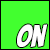
<style>
.page{position:relative;width:50px;height:50px;background:#42ff2f}
.page>*{position:absolute;margin:0}
.t1{font:30px "Bangers-Regular";color:#ffffff}
</style>
<div class="page">
<p class="t1" style="left:17px;top:24px;width:31px;height:23px">On</p>
</div>
